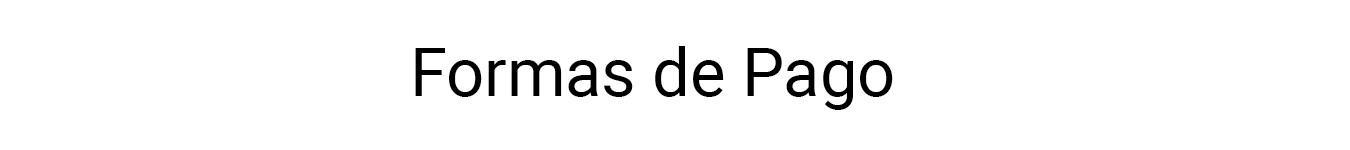
<style>
.page{position:relative;width:1350px;height:150px;background:#ffffff}
.page>*{position:absolute;margin:0}
.t1{font:66.7px "Roboto-Regular";color:#000000}
</style>
<div class="page">
<p class="t1" style="left:415px;top:46px;width:478px;height:64px">Formas de Pago</p>
</div>
